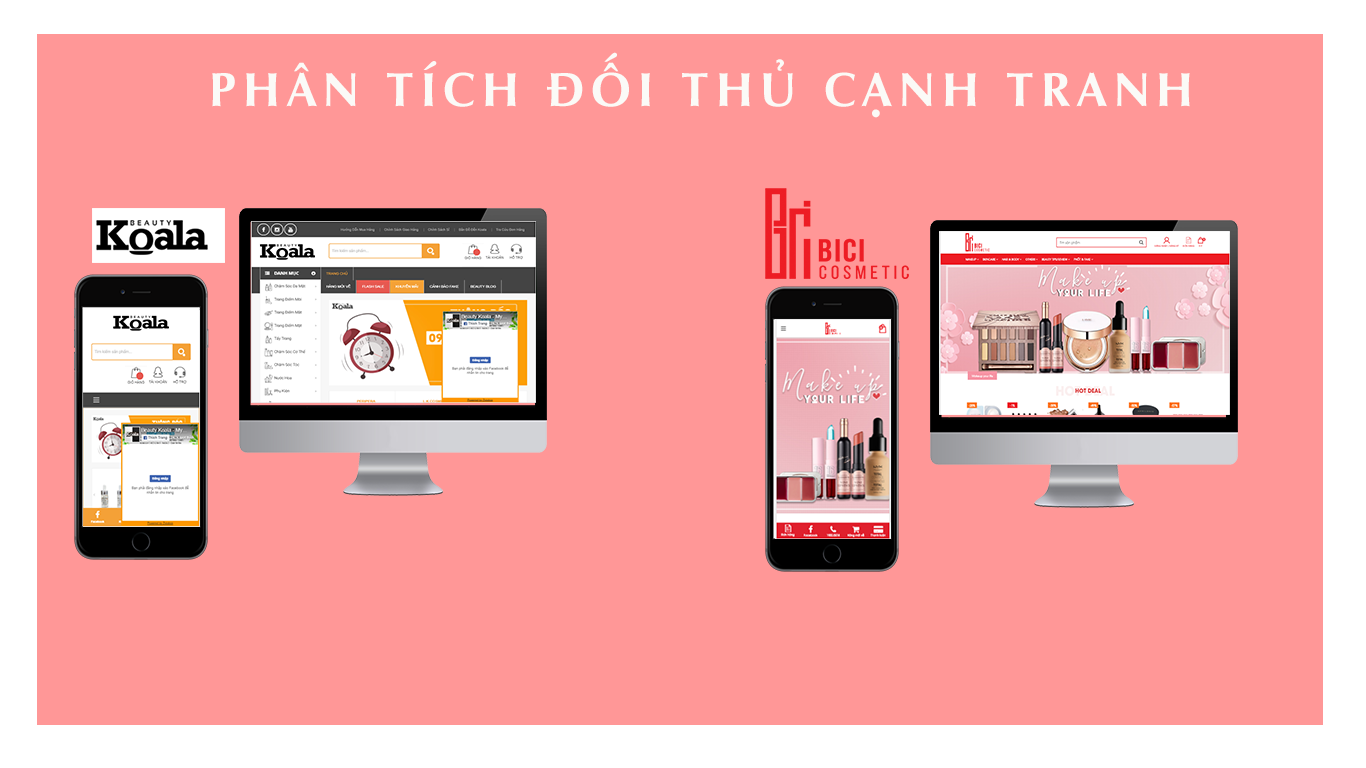
<style>
.page{position:relative;width:1366px;height:768px;background:#ff9797}
.page>*{position:absolute;margin:0}
.t1{font:48px "UVNNhanBold";letter-spacing:0.15em;color:#fbfaf7;text-transform:uppercase}
</style>
<div class="page">
<p class="t1" style="left:212px;top:52px;width:978px;height:66px">phân tích đối thủ cạnh tranh</p>
</div>
